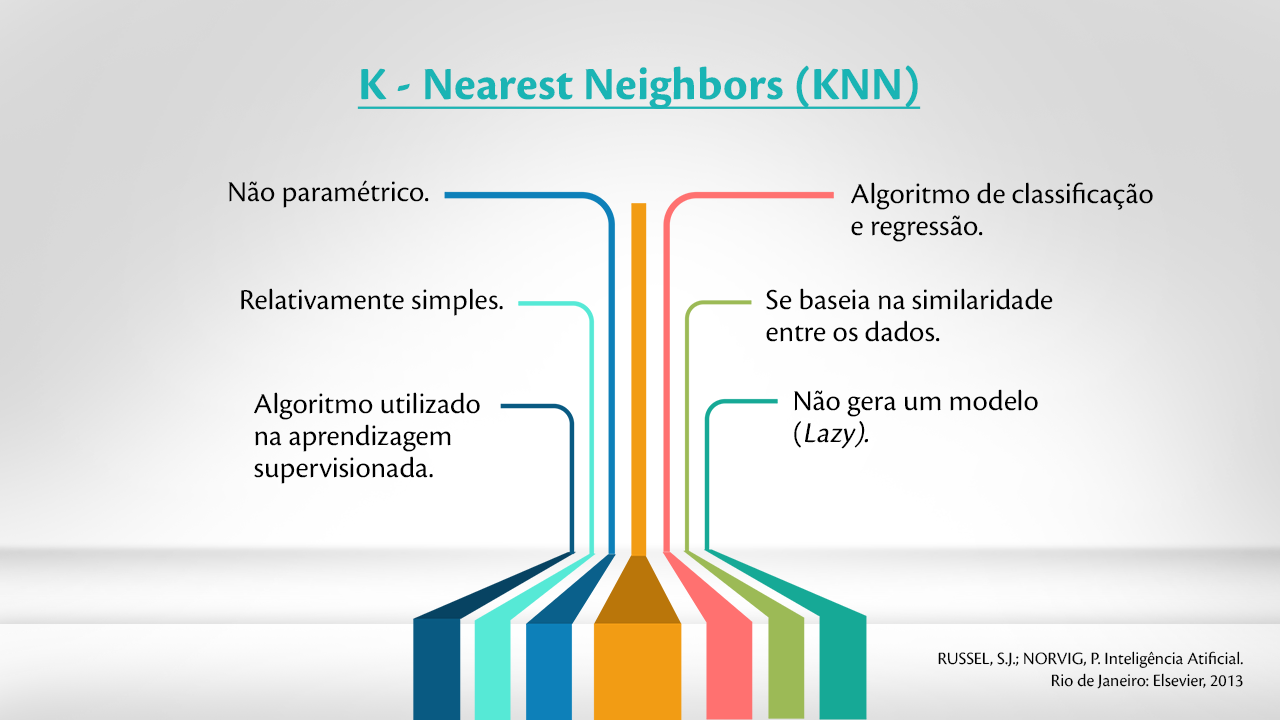
<style>
.page{position:relative;width:1280px;height:720px}
.page>*{position:absolute;margin:0}
.t1{font:47.8px "CronosPro-Bold";color:#1ab4b4;text-decoration:underline}
.t2{font:30px "CronosPro-Regular";color:#000000}
.t3{font:30px/31.8px "CronosPro-Regular";color:#000000}
.t4{font:30px/31.8px "CronosPro-Regular";color:#000000;font-style:italic}
.t5{font:18px "CronosPro-Regular";color:#000000}
</style>
<div class="page">
<p class="t1" style="left:357px;top:65px;width:564px;height:44px">K - Nearest Neighbors (KNN)</p>
<p class="t2" style="left:228px;top:180px;width:201px;height:28px">Não paramétrico.</p>
<p class="t3" style="left:851px;top:182px;width:302px;height:60px">Algoritmo de classificação e regressão.</p>
<p class="t2" style="left:241px;top:288px;width:262px;height:28px">Relativamente simples.</p>
<p class="t3" style="left:766px;top:288px;width:287px;height:54px">Se baseia na similaridade entre os dados.</p>
<p class="t3" style="left:794px;top:389px;width:244px;height:60px">Não gera um modelo (<span class="t4">Lazy).</span></p>
<p class="t3" style="left:254px;top:392px;width:226px;height:92px">Algoritmo utilizado <br>na aprendizagem <br>supervisionada.</p>
<p class="t5" style="left:938px;top:651px;width:305px;height:38px;text-align:right">RUSSEL, S.J.; NORVIG, P. Inteligência Atificial. <br>Rio de Janeiro: Elsevier, 2013</p>
</div>
